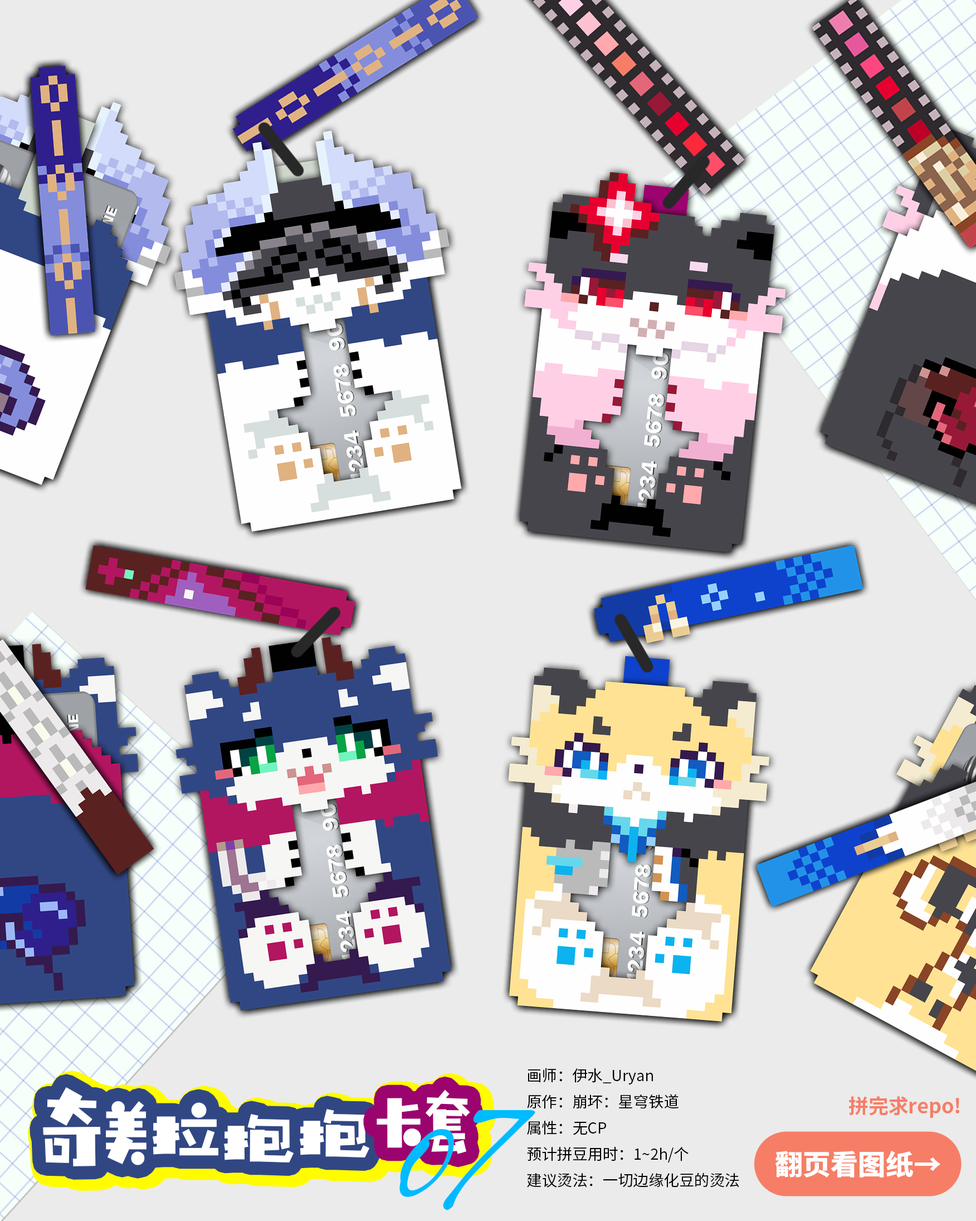
<style>
.page{position:relative;width:976px;height:1221px;background:#ebebeb}
.page>*{position:absolute;margin:0}
.t1{font:15.3px/26.1px "SourceHanSansCN-Regular";color:#000000}
.t2{font:87.6px "HYZhuZiTongNianTiW";color:#ffffff}
.t3{font:97.2px "HYZhuZiTongNianTiW";color:#ffffff}
.t4{font:86.1px "HYZhuZiTongNianTiW";color:#ffffff}
.t5{font:75.7px "HYZhuZiTongNianTiW";color:#ffffff}
.t6{font:20px "SourceHanSansCN-Bold";color:#f67e66}
.t7{font:127.8px "AllisonTessa-ExtraexpandedExtra";letter-spacing:-0.1em;color:#00bbff}
.t8{font:158.2px "AllisonTessa-ExtraexpandedExtra";letter-spacing:-0.1em;color:#00bbff}
.t9{font:27.7px "SourceHanSansCN-Heavy";color:#fffefe}
</style>
<div class="page">
<p class="t1" style="left:527px;top:1068px;width:213px;height:120px">画师：伊水_Uryan<br>原作：崩坏：星穹铁道<br>属性：无CP<br>预计拼豆用时：1~2h/个<br>建议烫法：一切边缘化豆的烫法</p>
<p class="t2" style="left:43px;top:1087px;width:327px;height:80px"><span class="t3">奇</span><span class="t4">美</span><span class="t3">拉</span>抱抱</p>
<p class="t5" style="left:377px;top:1090px;width:93px;height:64px">卡套</p>
<p class="t6" style="left:849px;top:1096px;width:111px;height:22px">拼完求repo!</p>
<p class="t7" style="left:400px;top:1110px;width:136px;height:101px">0<span class="t8">7</span></p>
<p class="t9" style="left:776px;top:1151px;width:165px;height:27px">翻页看图纸→</p>
</div>
